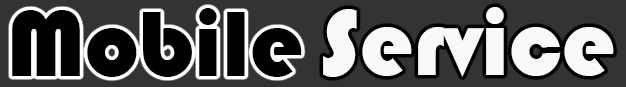
<style>
.page{position:relative;width:626px;height:87px;background:#333333}
.page>*{position:absolute;margin:0}
.t1{font:96px "Bauhaus93";color:#000000}
.t2{font:96px "Bauhaus93";color:#faf8f8}
</style>
<div class="page">
<p class="t1" style="left:12px;top:8px;width:290px;height:69px">Mobile</p>
<p class="t2" style="left:323px;top:7px;width:291px;height:70px">Service</p>
</div>
